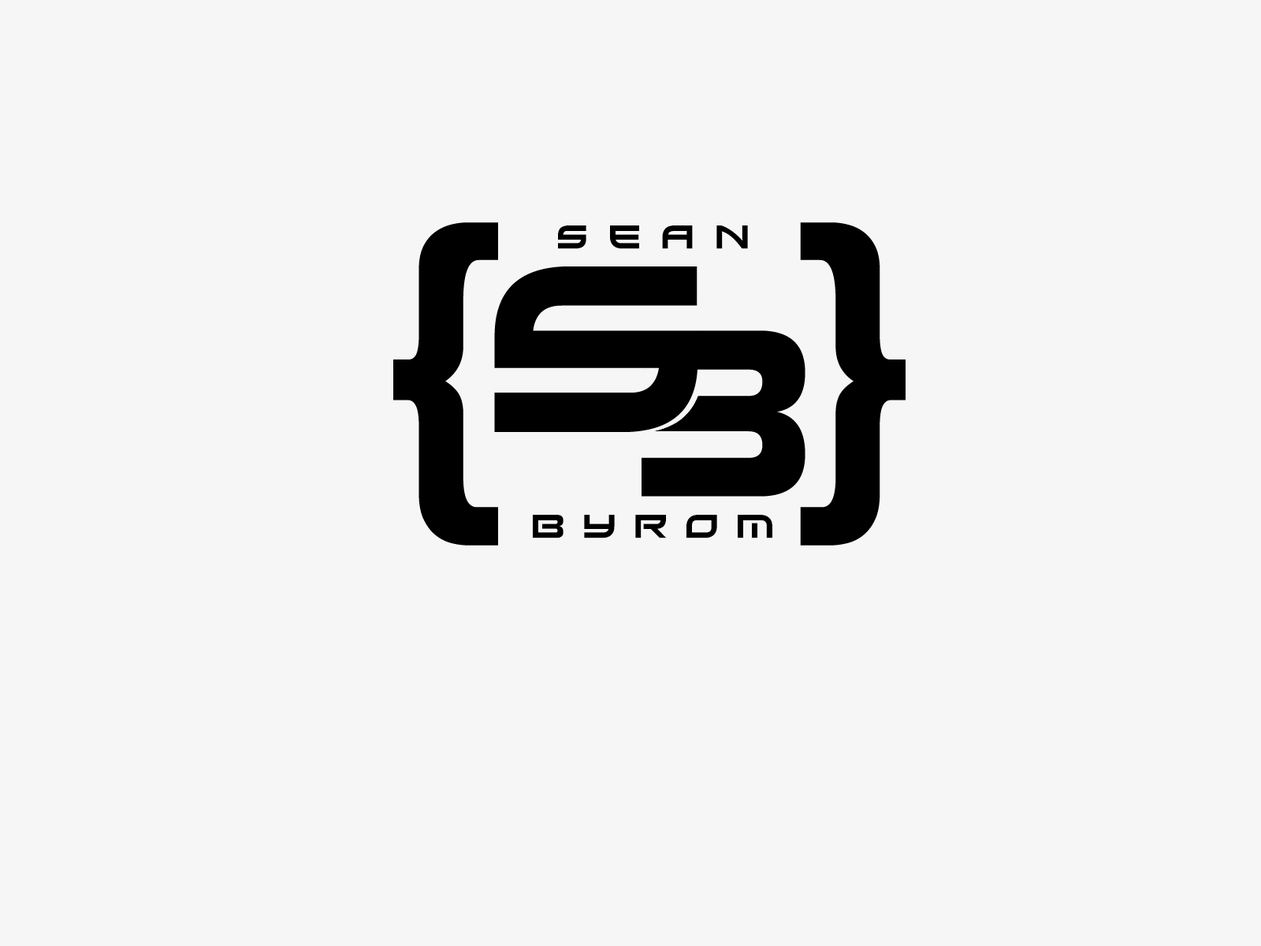
<style>
.page{position:relative;width:1261px;height:946px;background:#f6f6f6}
.page>*{position:absolute;margin:0}
.t1{font:32.8px "Xirod-Regular";letter-spacing:0.1em;color:#000000}
.t2{font:32.8px "Xirod-Regular";letter-spacing:0.05em;color:#000000}
</style>
<div class="page">
<p class="t1" style="left:558px;top:225px;width:190px;height:24px">s e a n</p>
<p class="t2" style="left:533px;top:515px;width:239px;height:23px">b y r o m</p>
</div>
